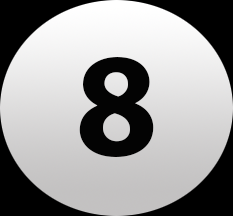
<style>
.page{position:relative;width:233px;height:216px;background:#000000}
.page>*{position:absolute;margin:0}
.t1{font:150px "MyriadPro-Bold";color:#030303}
</style>
<div class="page">
<p class="t1" style="left:79px;top:57px;width:75px;height:100px">8</p>
</div>
